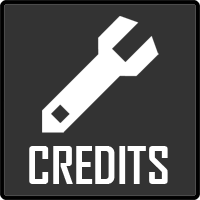
<style>
.page{position:relative;width:200px;height:200px;background:#333333}
.page>*{position:absolute;margin:0}
.t1{font:50px "AgencyFB-Bold";color:#ffffff}
</style>
<div class="page">
<p class="t1" style="left:29px;top:146px;width:139px;height:38px">CREDITS</p>
</div>
